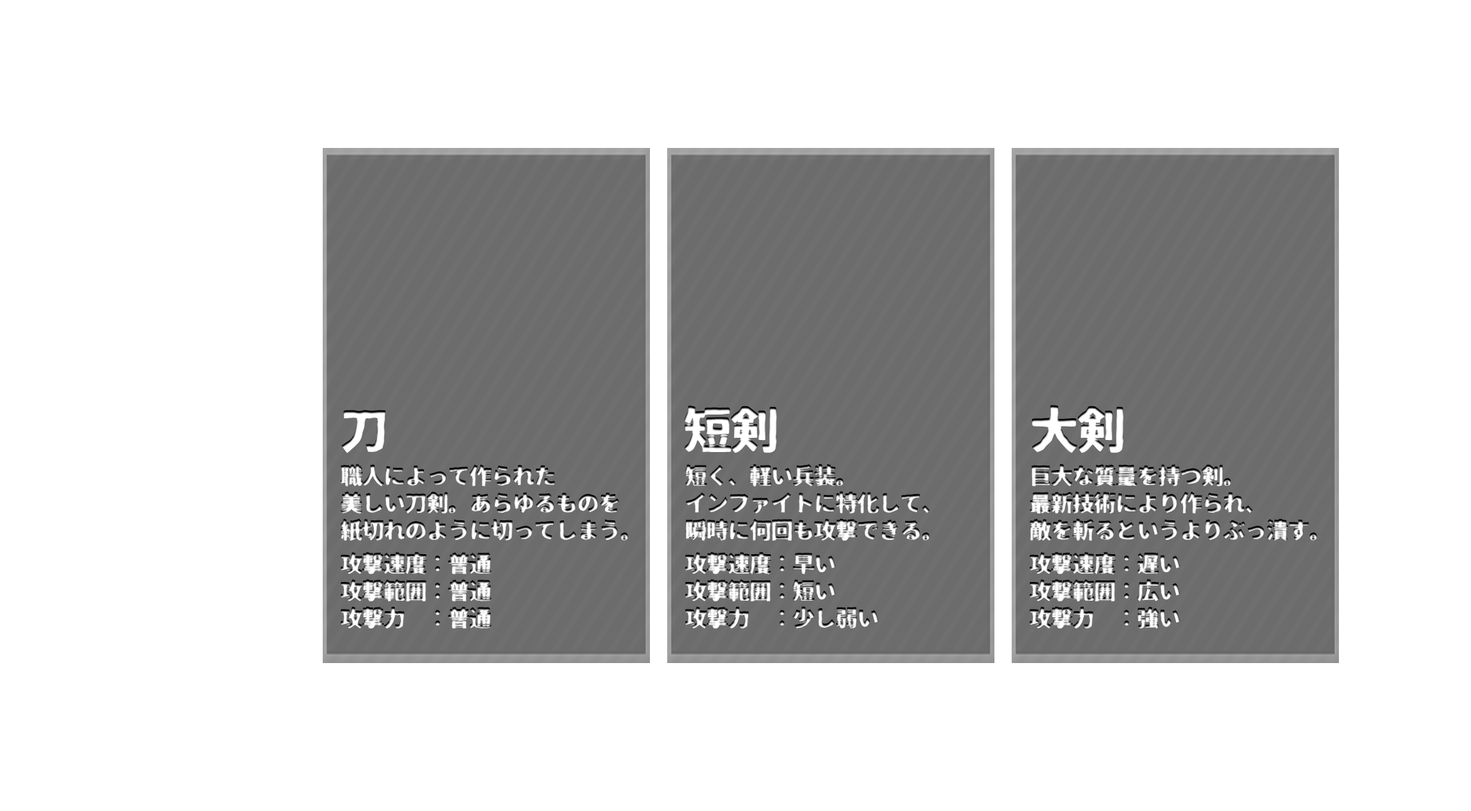
<style>
.page{position:relative;width:1471px;height:811px;background:#ffffff}
.page>*{position:absolute;margin:0}
.t1{font:49.3px "07TetsubinGothic";letter-spacing:-0.05em;color:#ffffff}
.t2{font:22.7px "07TetsubinGothic";letter-spacing:-0.05em}
</style>
<div class="page">
<p class="t1" style="left:341px;top:410px;width:45px;height:43px">刀</p>
<p class="t1" style="left:684px;top:405px;width:93px;height:48px">短剣</p>
<p class="t1" style="left:1031px;top:405px;width:93px;height:48px">大剣</p>
<p class="t2" style="left:340px;top:464px;width:288px;height:76px">職人によって作られた<br>美しい刀剣。あらゆるものを<br>紙切れのように切ってしまう。</p>
<p class="t2" style="left:684px;top:464px;width:246px;height:76px">短く、軽い兵装。<br>インファイトに特化して、<br>瞬時に何回も攻撃できる。</p>
<p class="t2" style="left:1030px;top:464px;width:287px;height:76px">巨大な質量を持つ剣。<br>最新技術により作られ、<br>敵を斬るというよりぶっ潰す。</p>
<p class="t2" style="left:341px;top:552px;width:151px;height:76px">攻撃速度：普通<br>攻撃範囲：普通<br>攻撃力　：普通</p>
<p class="t2" style="left:685px;top:552px;width:194px;height:76px">攻撃速度：早い<br>攻撃範囲：短い<br>攻撃力　：少し弱い</p>
<p class="t2" style="left:1030px;top:552px;width:151px;height:76px">攻撃速度：遅い<br>攻撃範囲：広い<br>攻撃力　：強い</p>
</div>
